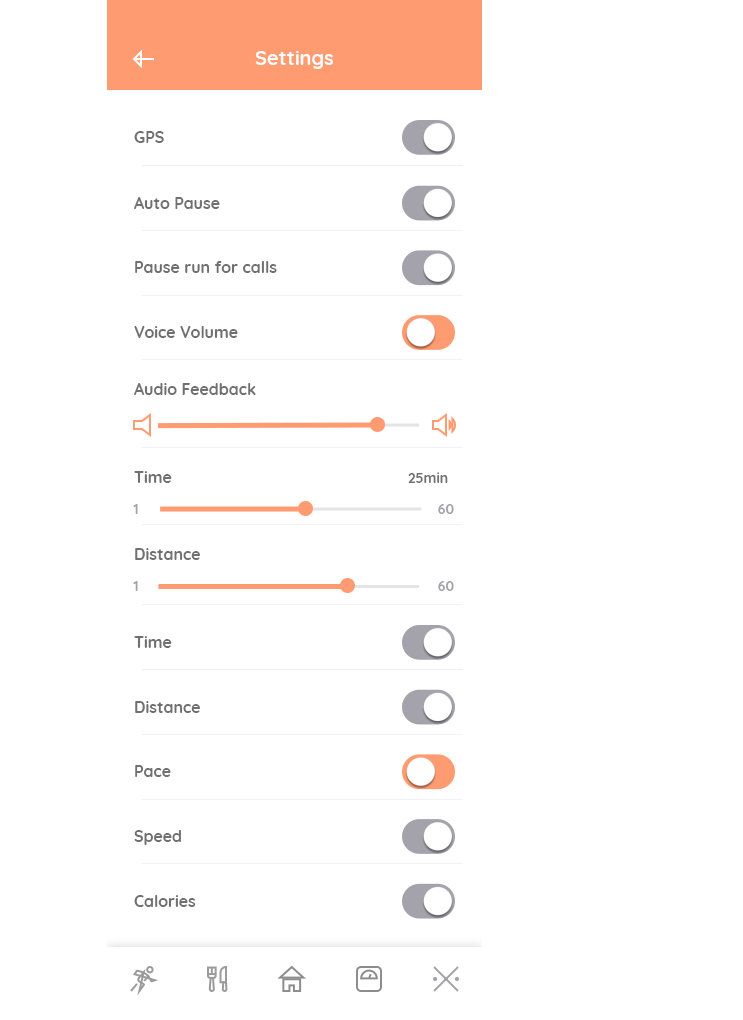
<style>
.page{position:relative;width:743px;height:1020px;background:#ffffff}
.page>*{position:absolute;margin:0}
.t1{font:20px "Quicksand-Bold";color:#ffffff}
.t2{font:16px "Quicksand-Bold";color:#707070}
.t3{font:14px "Quicksand-Bold";color:#707070}
.t4{font:14px "Quicksand-Bold";color:#a4a2aa}
</style>
<div class="page">
<p class="t1" style="left:255px;top:51px;width:78px;height:18px">Settings</p>
<p class="t2" style="left:134px;top:131px;width:30px;height:12px">GPS</p>
<p class="t2" style="left:134px;top:197px;width:86px;height:12px">Auto Pause</p>
<p class="t2" style="left:135px;top:261px;width:142px;height:12px">Pause run for calls</p>
<p class="t2" style="left:134px;top:326px;width:104px;height:12px">Voice Volume</p>
<p class="t2" style="left:134px;top:383px;width:122px;height:12px">Audio Feedback</p>
<p class="t2" style="left:134px;top:471px;width:38px;height:12px">Time</p>
<p class="t3" style="left:408px;top:472px;width:40px;height:11px">25min</p>
<p class="t4" style="left:133px;top:504px;width:5px;height:10px">1</p>
<p class="t4" style="left:438px;top:504px;width:16px;height:10px">60</p>
<p class="t2" style="left:135px;top:548px;width:65px;height:12px">Distance</p>
<p class="t4" style="left:133px;top:581px;width:5px;height:10px">1</p>
<p class="t4" style="left:438px;top:581px;width:16px;height:10px">60</p>
<p class="t2" style="left:134px;top:636px;width:38px;height:12px">Time</p>
<p class="t2" style="left:135px;top:701px;width:65px;height:12px">Distance</p>
<p class="t2" style="left:135px;top:765px;width:36px;height:12px">Pace</p>
<p class="t2" style="left:134px;top:830px;width:47px;height:15px">Speed</p>
<p class="t2" style="left:134px;top:895px;width:62px;height:12px">Calories</p>
</div>
